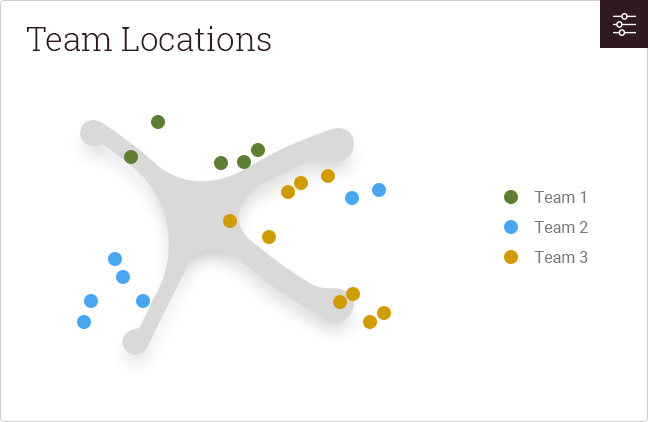
<style>
.page{position:relative;width:648px;height:422px;background:#ffffff}
.page>*{position:absolute;margin:0}
.t1{font:33px "RobotoSlab-Light";color:#2f1b1f}
.t2{font:16px "Roboto-Regular";color:#767676}
</style>
<div class="page">
<p class="t1" style="left:26px;top:26px;width:245px;height:25px">Team Locations</p>
<p class="t2" style="left:534px;top:191px;width:52px;height:12px">Team 1</p>
<p class="t2" style="left:534px;top:221px;width:54px;height:12px">Team 2</p>
<p class="t2" style="left:534px;top:251px;width:54px;height:12px">Team 3</p>
</div>
